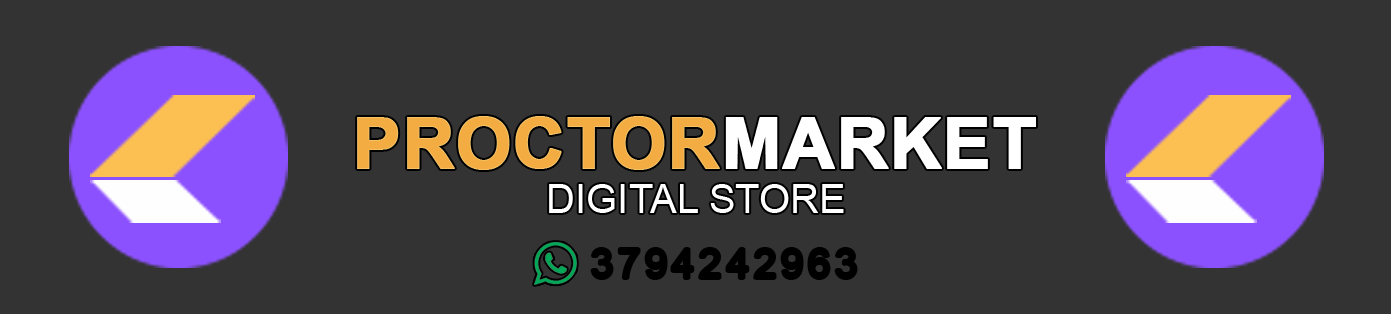
<style>
.page{position:relative;width:1391px;height:314px;background:#333333}
.page>*{position:absolute;margin:0}
.t1{font:71.2px "Arial-BoldMT";color:#f3ac42;font-weight:bold}
.t2{font:71.2px "Arial-BoldMT";color:#ffffff;font-weight:bold}
.t3{font:40px "ArialMT";color:#ffffff}
.t4{font:40px "ArialMT";letter-spacing:0.12em;color:#000000}
</style>
<div class="page">
<p class="t1" style="left:357px;top:116px;width:363px;height:54px">PROCTOR</p>
<p class="t2" style="left:725px;top:117px;width:311px;height:52px">MARKET</p>
<p class="t3" style="left:549px;top:184px;width:295px;height:29px">DIGITAL STORE</p>
<p class="t4" style="left:592px;top:249px;width:264px;height:29px">3794242963</p>
</div>
